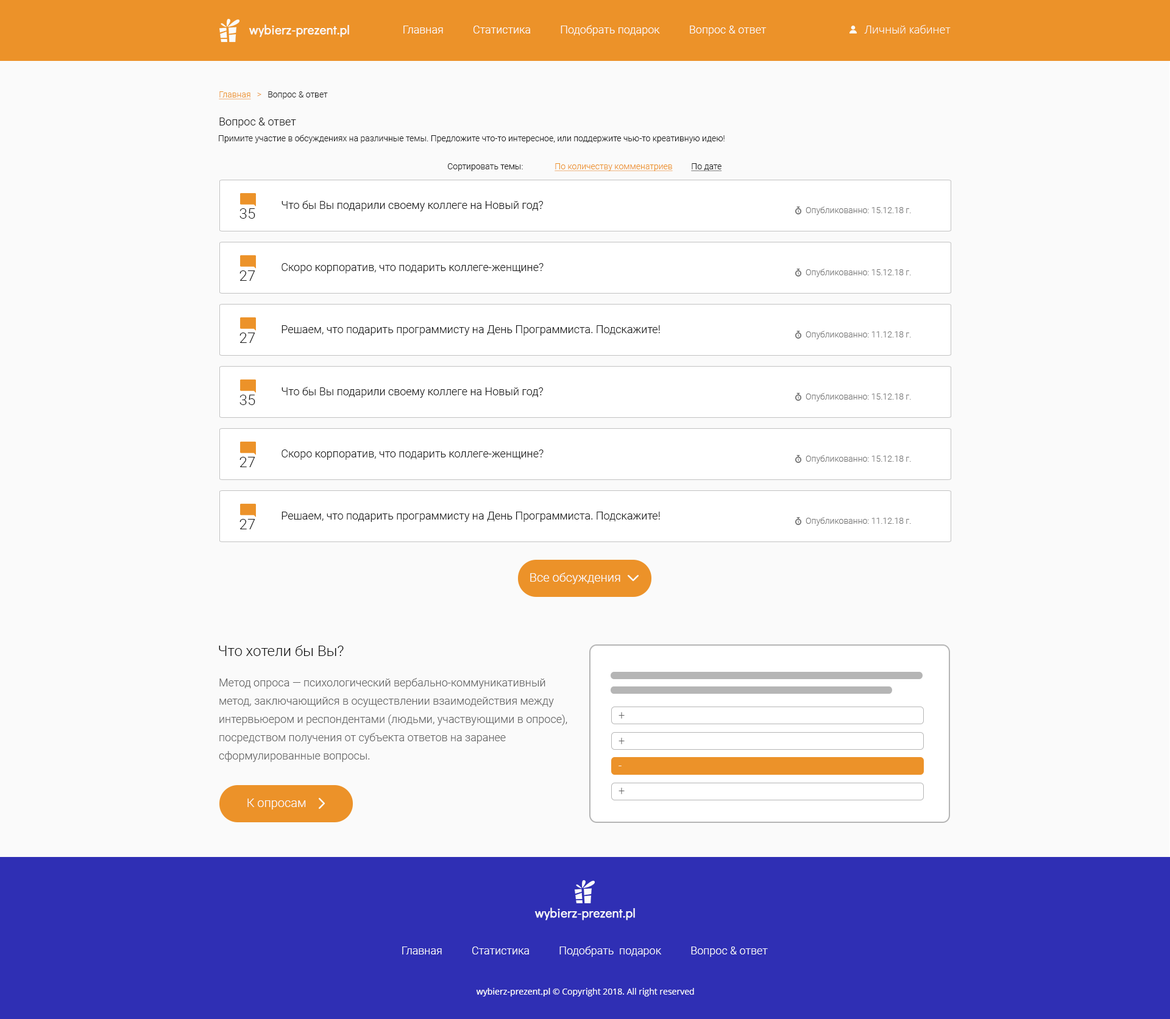
<style>
.page{position:relative;width:1170px;height:1019px;background:#fafafa}
.page>*{position:absolute;margin:0}
.t1{font:12.2px "DidactGothic-Regular";color:#fafafa;font-weight:bold}
.t2{font:11px "Roboto-Light";color:#fafafa}
.t3{font:11px "OpenSans-Light";color:#fafafa}
.t4{font:8.5px "Roboto-Light";color:#1b1b1b}
.t5{font:8.5px "Roboto-Light";color:#ec9229;text-decoration:underline}
.t6{font:8.5px "Roboto-Light";color:#ec9229}
.t7{font:11px "Roboto-Light";color:#1b1b1b}
.t8{font:8.5px "Roboto-Light";color:#191919}
.t9{font:8.5px "Roboto-Light";color:#191919;text-decoration:underline}
.t10{font:14.6px "Roboto-Light";color:#191919}
.t11{font:11px "Roboto-Light";color:#191919}
.t12{font:8.5px "Roboto-Light";color:#767676}
.t13{font:12.2px "Roboto-Light";color:#fafafa}
.t14{font:14.6px "Roboto-Light";color:#080808}
.t15{font:11px/18.3px "Roboto-Light";color:#656565}
.t16{font:11.3px "Roboto-Light";color:#656565;scale:0.95 1}
.t17{font:11.3px "Roboto-Light";color:#fafafa;scale:0.95 1}
.t18{font:8.5px "OpenSans-Regular";color:#fafafa}
.t19{font:8.5px "NotoSans";color:#fafafa}
</style>
<div class="page">
<p class="t1" style="left:249px;top:24px;width:100px;height:13px">wybierz-prezent.pl</p>
<p class="t2" style="left:403px;top:25px;width:363px;height:11px">Главная           Статистика           Подобрать подарок           Вопрос &amp; ответ</p>
<p class="t3" style="left:864px;top:25px;width:86px;height:9px">Личный кабинет</p>
<p class="t4" style="left:219px;top:91px;width:109px;height:9px"><span class="t5">Главная   </span><span class="t6">&gt;   </span>Вопрос &amp; ответ</p>
<p class="t7" style="left:219px;top:118px;width:77px;height:10px">Вопрос &amp; ответ</p>
<p class="t8" style="left:219px;top:135px;width:505px;height:8px">Примите участие в обсуждениях на различные темы. Предложите что-то интересное, или поддержите чью-то креативную идею!</p>
<p class="t8" style="left:448px;top:163px;width:75px;height:8px">Сортировать темы:</p>
<p class="t5" style="left:554px;top:163px;width:119px;height:8px">По количеству комменатриев</p>
<p class="t9" style="left:691px;top:163px;width:31px;height:8px">По дате</p>
<p class="t10" style="left:239px;top:208px;width:16px;height:11px">35</p>
<p class="t11" style="left:281px;top:200px;width:262px;height:11px">Что бы Вы подарили своему коллеге на Новый год?</p>
<p class="t12" style="left:805px;top:207px;width:106px;height:8px">Опубликованно: 15.12.18 г.</p>
<p class="t11" style="left:281px;top:263px;width:262px;height:11px">Скоро корпоратив, что подарить коллеге-женщине?</p>
<p class="t12" style="left:805px;top:269px;width:106px;height:8px">Опубликованно: 15.12.18 г.</p>
<p class="t10" style="left:239px;top:271px;width:16px;height:10px">27</p>
<p class="t11" style="left:281px;top:325px;width:379px;height:11px">Решаем, что подарить программисту на День Программиста. Подскажите!</p>
<p class="t10" style="left:239px;top:333px;width:16px;height:10px">27</p>
<p class="t12" style="left:805px;top:331px;width:106px;height:8px">Опубликованно: 11.12.18 г.</p>
<p class="t11" style="left:281px;top:387px;width:262px;height:11px">Что бы Вы подарили своему коллеге на Новый год?</p>
<p class="t10" style="left:239px;top:395px;width:16px;height:10px">35</p>
<p class="t12" style="left:805px;top:393px;width:106px;height:9px">Опубликованно: 15.12.18 г.</p>
<p class="t11" style="left:281px;top:450px;width:262px;height:10px">Скоро корпоратив, что подарить коллеге-женщине?</p>
<p class="t10" style="left:239px;top:457px;width:16px;height:10px">27</p>
<p class="t12" style="left:805px;top:455px;width:106px;height:9px">Опубликованно: 15.12.18 г.</p>
<p class="t10" style="left:239px;top:519px;width:16px;height:10px">27</p>
<p class="t11" style="left:281px;top:512px;width:379px;height:10px">Решаем, что подарить программисту на День Программиста. Подскажите!</p>
<p class="t12" style="left:805px;top:517px;width:106px;height:9px">Опубликованно: 11.12.18 г.</p>
<p class="t13" style="left:530px;top:573px;width:90px;height:11px">Все обсуждения</p>
<p class="t14" style="left:219px;top:645px;width:125px;height:11px">Что хотели бы Вы?</p>
<p class="t15" style="left:219px;top:678px;width:348px;height:84px;text-align:right">Ме́тод опро́са — психологический вербально-коммуникативный метод, заключающийся в осуществлении взаимодействия между интервьюером и респондентами (людьми, участвующими в опросе), посредством получения от субъекта ответов на заранее сформулированные вопросы.</p>
<p class="t16" style="left:618px;top:712px;width:7px;height:7px">+</p>
<p class="t16" style="left:618px;top:738px;width:7px;height:7px">+</p>
<p class="t17" style="left:618px;top:766px;width:3px;height:0px">-</p>
<p class="t16" style="left:618px;top:788px;width:7px;height:7px">+</p>
<p class="t13" style="left:247px;top:799px;width:59px;height:11px">К опросам</p>
<p class="t1" style="left:534px;top:908px;width:101px;height:13px">wybierz-prezent.pl</p>
<p class="t2" style="left:402px;top:946px;width:366px;height:11px">Главная           Статистика           Подобрать  подарок           Вопрос &amp; ответ</p>
<p class="t18" style="left:476px;top:988px;width:218px;height:9px"><span class="t19">wybierz-prezent.pl </span>© Copyright 2018. All right reserved</p>
</div>
